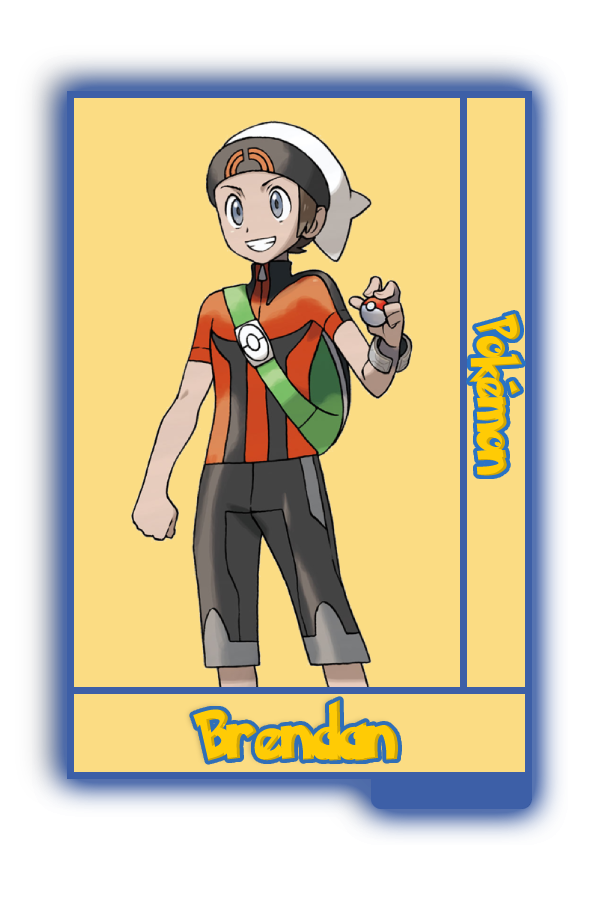
<style>
.page{position:relative;width:600px;height:900px;background:#fbdc83}
.page>*{position:absolute;margin:0}
.t1{font:48.8px "PokemonSolidNormal";color:#ffcb05;scale:0.8 1}
.t2{font:56.6px "PokemonSolidNormal";color:#ffcb05;scale:0.92 1}
</style>
<div class="page">
<p class="t1" style="left:469px;top:313px;width:54px;height:163px;rotate:90deg">Pokémon</p>
<p class="t2" style="left:193px;top:699px;width:206px;height:62px">Brendan</p>
</div>
